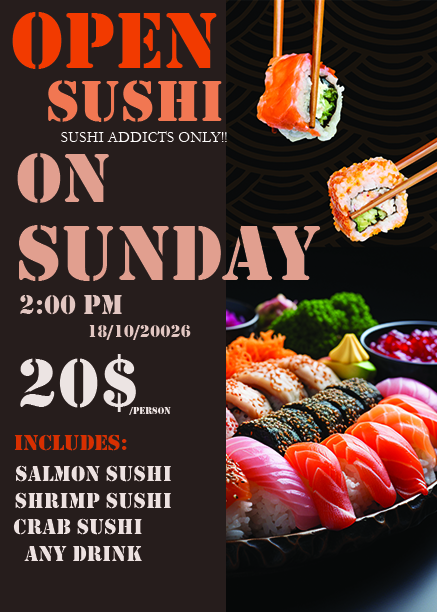
<style>
.page{position:relative;width:437px;height:612px;background:#261d1c}
.page>*{position:absolute;margin:0}
.t1{font:81.8px "Stencil";color:#f33a00}
.t2{font:60.4px "Stencil";color:#f17752}
.t3{font:15.5px "Garamond";color:#fbfafa}
.t4{font:72px "Stencil";color:#e19f8f}
.t5{font:80.9px "Stencil";color:#e19f8f}
.t6{font:27.9px "Stencil";color:#e2c7c2}
.t7{font:17.8px "Stencil";color:#e2c7c2}
.t8{font:72px "Stencil";color:#ece4e3}
.t9{font:9.9px "Stencil";color:#ece4e3}
.t10{font:22.8px "Stencil";color:#d72f00}
.t11{font:22.3px "Stencil";color:#ede2e1}
</style>
<div class="page">
<p class="t1" style="left:12px;top:12px;width:205px;height:57px">OPEN</p>
<p class="t2" style="left:48px;top:80px;width:174px;height:42px">SUSHI</p>
<p class="t3" style="left:61px;top:131px;width:166px;height:11px">SUSHI ADDICTS ONLY!!</p>
<p class="t4" style="left:17px;top:153px;width:92px;height:50px">On</p>
<p class="t5" style="left:19px;top:225px;width:302px;height:56px">SUNDAY</p>
<p class="t6" style="left:20px;top:295px;width:102px;height:20px">2:00 PM</p>
<p class="t7" style="left:89px;top:325px;width:102px;height:15px">18/10/20026</p>
<p class="t8" style="left:20px;top:354px;width:116px;height:58px">20$</p>
<p class="t9" style="left:129px;top:407px;width:42px;height:8px">/PERSON</p>
<p class="t10" style="left:14px;top:434px;width:113px;height:17px">INCLUDES:</p>
<p class="t11" style="left:15px;top:465px;width:156px;height:44px;text-align:right">salmon sushi<br>shrimp sushi</p>
<p class="t11" style="left:13px;top:518px;width:129px;height:43px;text-align:right">crab sushi<br>any drink</p>
</div>
